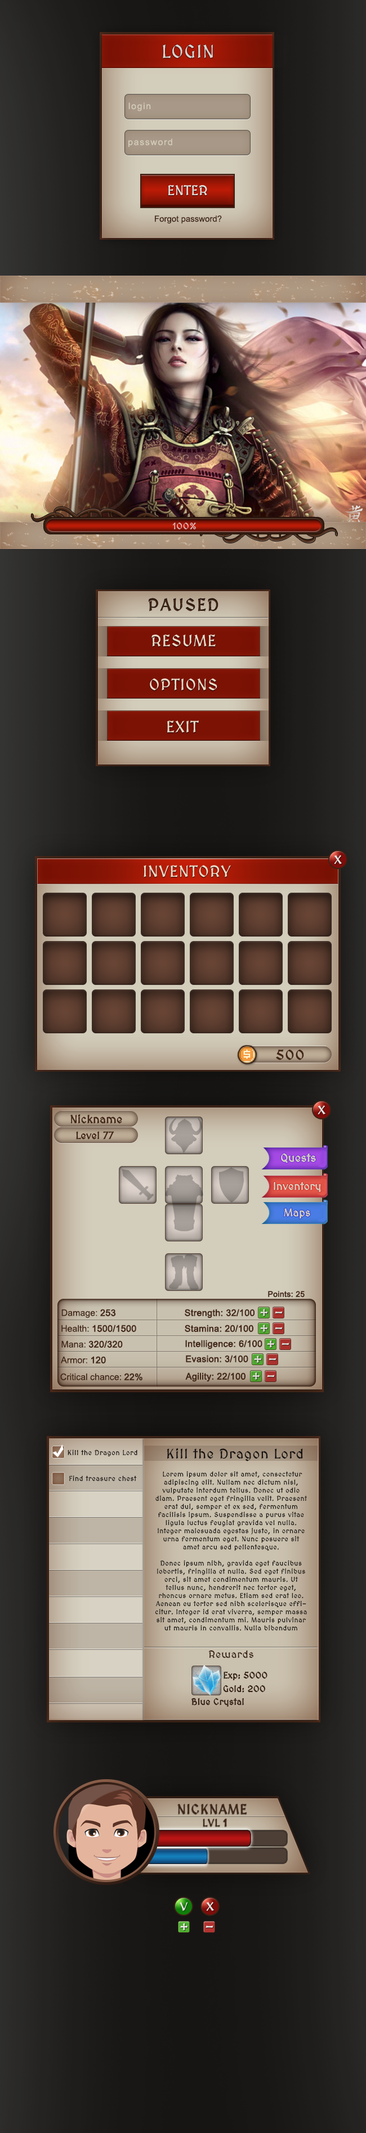
<style>
.page{position:relative;width:366px;height:2133px}
.page>*{position:absolute;margin:0}
.t1{font:18px "MedievalSharp";letter-spacing:0.06em;color:#d8d5d0;text-transform:uppercase}
.t2{font:9px "ArialMT";letter-spacing:0.1em;color:#d3ccba}
.t3{font:13.5px "MedievalSharp";letter-spacing:0.04em;color:#e4e0d5;text-transform:uppercase}
.t4{font:8.4px "ArialMT";color:#402517}
.t5{font:9px "MedievalSharp";letter-spacing:0.06em;color:#deb7b5;text-transform:uppercase}
.t6{font:16.9px "MedievalSharp";letter-spacing:0.06em;color:#422617;text-transform:uppercase;font-weight:bold}
.t7{font:15.8px "MedievalSharp";letter-spacing:0.06em;color:#efdbc6;text-transform:uppercase}
.t8{font:13.5px "MedievalSharp";letter-spacing:0.06em;color:#422617;text-transform:uppercase;font-weight:bold}
.t9{font:11.2px "MedievalSharp";color:#422617;font-weight:bold}
.t10{font:10.1px "MedievalSharp";color:#422617;font-weight:bold}
.t11{font:11.2px "MedievalSharp";color:#d3cdbb;font-weight:bold}
.t12{font:10.7px "MedievalSharp";color:#d3cdbb;font-weight:bold}
.t13{font:7.9px "ArialMT";color:#422617;font-weight:bold}
.t14{font:9px "ArialMT";color:#422617}
.t15{font:9px "ArialMT";color:#422617;font-weight:bold}
.t16{font:6.9px "MedievalSharp";letter-spacing:0.06em;color:#151210}
.t17{font:13.5px "MedievalSharp";letter-spacing:0.06em;color:#151210}
.t18{font:6.8px "MedievalSharp";letter-spacing:0.06em;color:#151210}
.t19{font:10.1px "MedievalSharp";letter-spacing:0.06em;color:#362014}
.t20{font:9px "MedievalSharp";color:#351f14;font-weight:bold}
.t21{font:13.5px "MedievalSharp";letter-spacing:0.06em;color:#422617;text-transform:uppercase}
.t22{font:10.1px "MedievalSharp";letter-spacing:0.06em;color:#422617;text-transform:uppercase}
.t23{font:10.1px "MedievalSharp";letter-spacing:0.06em;color:#422617;text-transform:uppercase;font-weight:bold}
</style>
<div class="page">
<p class="t1" style="left:163px;top:44px;width:50px;height:14px">Login</p>
<p class="t2" style="left:128px;top:102px;width:23px;height:9px">login</p>
<p class="t2" style="left:128px;top:138px;width:44px;height:9px">password</p>
<p class="t3" style="left:168px;top:185px;width:39px;height:10px">enter</p>
<p class="t4" style="left:155px;top:215px;width:67px;height:9px">Forgot password?</p>
<p class="t5" style="left:172px;top:523px;width:24px;height:6px">100%</p>
<p class="t6" style="left:148px;top:598px;width:70px;height:13px">paused</p>
<p class="t7" style="left:151px;top:634px;width:64px;height:13px">resume</p>
<p class="t7" style="left:150px;top:678px;width:67px;height:13px">options</p>
<p class="t7" style="left:167px;top:721px;width:32px;height:12px">exit</p>
<p class="t7" style="left:143px;top:865px;width:88px;height:13px">inventory</p>
<p class="t8" style="left:276px;top:1049px;width:28px;height:11px">500</p>
<p class="t9" style="left:70px;top:1114px;width:52px;height:10px">Nickname</p>
<p class="t10" style="left:76px;top:1131px;width:38px;height:9px">Level 77</p>
<p class="t11" style="left:281px;top:1153px;width:35px;height:10px">Quests</p>
<p class="t12" style="left:273px;top:1182px;width:48px;height:10px">Inventory</p>
<p class="t12" style="left:284px;top:1208px;width:26px;height:11px">Maps</p>
<p class="t13" style="left:268px;top:1291px;width:36px;height:6px">Points: 25</p>
<p class="t14" style="left:61px;top:1309px;width:55px;height:9px">Damage: <span class="t15">253</span></p>
<p class="t15" style="left:184px;top:1309px;width:70px;height:9px">Strength: 32/100</p>
<p class="t15" style="left:61px;top:1325px;width:75px;height:7px"><span class="t14">Health: </span>1500/1500</p>
<p class="t15" style="left:184px;top:1325px;width:69px;height:7px">Stamina: 20/100</p>
<p class="t15" style="left:61px;top:1340px;width:62px;height:8px"><span class="t14">Mana: </span>320/320</p>
<p class="t15" style="left:185px;top:1340px;width:77px;height:9px">Intelligence: 6/100</p>
<p class="t14" style="left:61px;top:1356px;width:45px;height:8px">Armor: <span class="t15">120</span></p>
<p class="t15" style="left:186px;top:1355px;width:62px;height:7px">Evasion: 3/100</p>
<p class="t14" style="left:60px;top:1373px;width:82px;height:8px">Critical chance: <span class="t15">22%</span></p>
<p class="t15" style="left:185px;top:1372px;width:60px;height:10px">Agility: 22/100</p>
<p class="t16" style="left:68px;top:1450px;width:69px;height:7px">Kill the Dragon Lord</p>
<p class="t17" style="left:167px;top:1448px;width:136px;height:13px">Kill the Dragon Lord</p>
<p class="t16" style="left:69px;top:1475px;width:68px;height:6px">Find treasure chest</p>
<p class="t18" style="left:155px;top:1471px;width:152px;height:160px;text-align:center">Lorem ipsum dolor sit amet, consectetur adipiscing elit. Nullam nec dictum nisl, vulputate interdum tellus. Donec ut odio diam. Praesent eget fringilla velit. Praesent erat dui, semper et ex sed, fermentum facilisis ipsum. Suspendisse a purus vitae ligula luctus feugiat gravida vel nulla. Integer malesuada egestas justo, in ornare urna fermentum eget. Nunc posuere sit amet arcu sed pellentesque.<br><br>Donec ipsum nibh, gravida eget faucibus lobortis, fringilla et nulla. Sed eget finibus orci, sit amet condimentum mauris. Ut tellus nunc, hendrerit nec tortor eget, rhoncus ornare metus. Etiam sed erat leo. Aenean eu tortor sed nibh scelerisque efficitur. Integer id erat viverra, semper massa sit amet, condimentum mi. Mauris pulvinar ut mauris in convallis. Nulla bibendum magna nec ipsum fermentum ultricies. Duis vestibulum quis odio id ullamcorper. Curabitur vel mi eget dolor feugiat viverra quis id orci. Morbi in libero malesuada, sodales odio sed, vehicula ligula. Maecenas semper metus eu euismod feugiat. Praesent consectetur odio felis, eget venenatis eros pretium et. Donec egestas velit id sem vulputate mattis. Etiam pharetra velit rutrum, dictum nibh vel, rhoncus velit. Phasellus nibh velit, iaculis ut tellus in, auctor malesuada arcu.</p>
<p class="t19" style="left:209px;top:1650px;width:44px;height:8px">Rewards</p>
<p class="t20" style="left:223px;top:1671px;width:44px;height:10px">Exp: 5000</p>
<p class="t20" style="left:223px;top:1685px;width:42px;height:8px">Gold: 200</p>
<p class="t20" style="left:191px;top:1698px;width:53px;height:9px">Blue Crystal</p>
<p class="t21" style="left:177px;top:1803px;width:69px;height:11px">nickname</p>
<p class="t22" style="left:202px;top:1819px;width:25px;height:7px">lvl <span class="t23">1</span></p>
</div>
